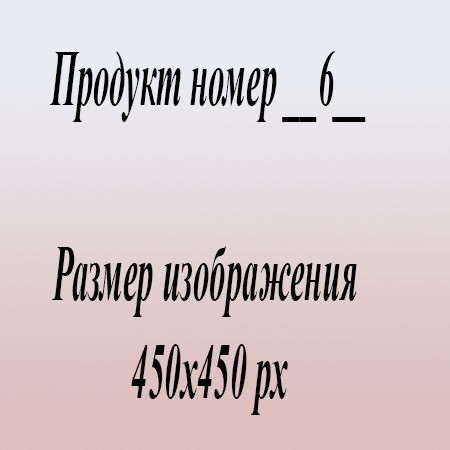
<style>
.page{position:relative;width:450px;height:450px}
.page>*{position:absolute;margin:0}
.t1{font:81.4px "TimesNewRomanPS-BoldItalicMT";color:#000000;scale:0.4 1}
</style>
<div class="page">
<p class="t1" style="left:50px;top:51px;width:316px;height:364px;text-align:center">Продукт номер __6__<br><br>Размер изображения <br>450х450 px</p>
</div>
